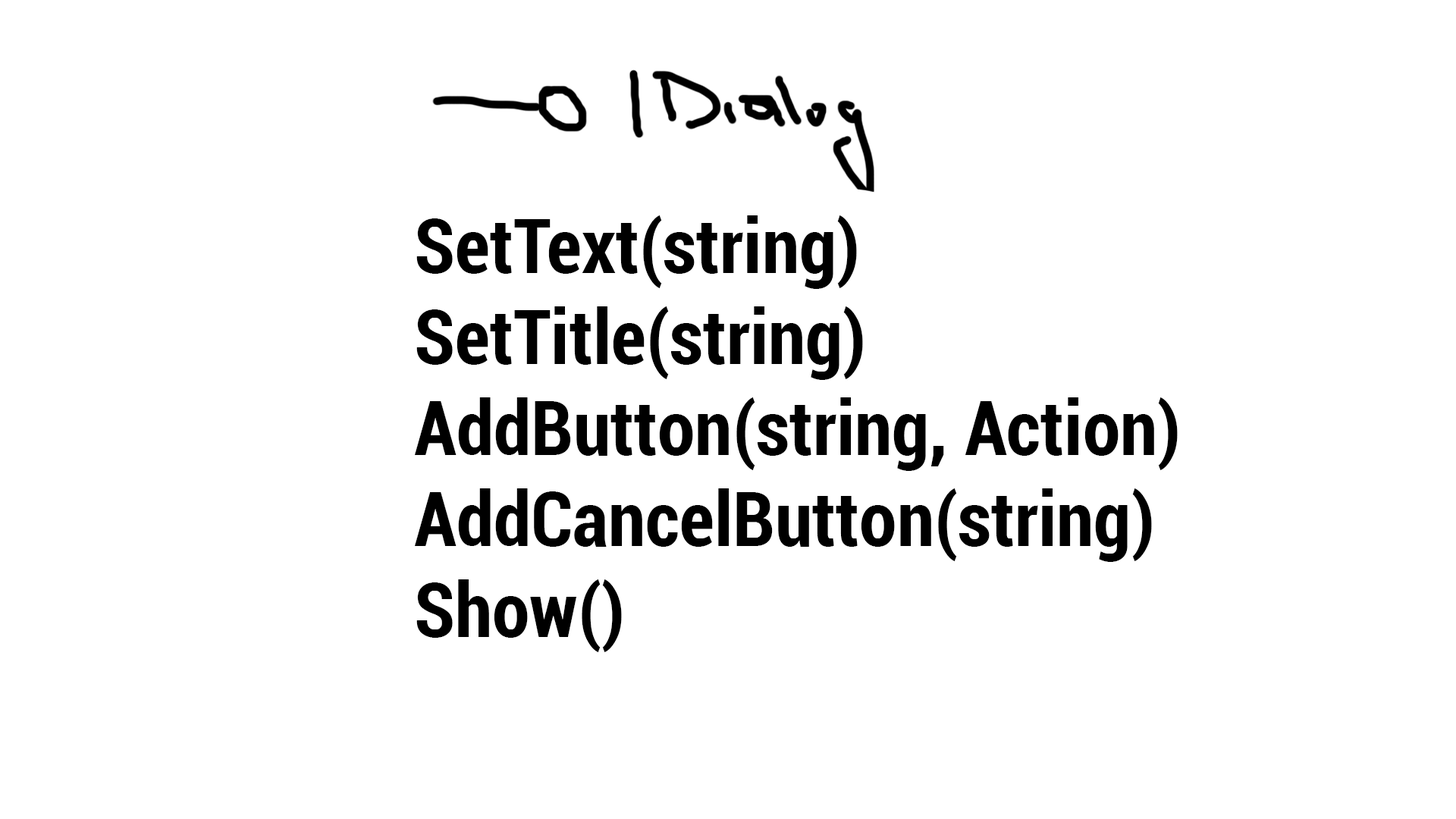
<style>
.page{position:relative;width:1456px;height:819px;background:#ffffff}
.page>*{position:absolute;margin:0}
.t1{font:75.8px "Roboto-BoldCondensed";color:#000000}
</style>
<div class="page">
<p class="t1" style="left:415px;top:215px;width:763px;height:437px">SetText(string)<br>SetTitle(string)<br>AddButton(string, Action)<br>AddCancelButton(string)<br>Show()</p>
</div>
